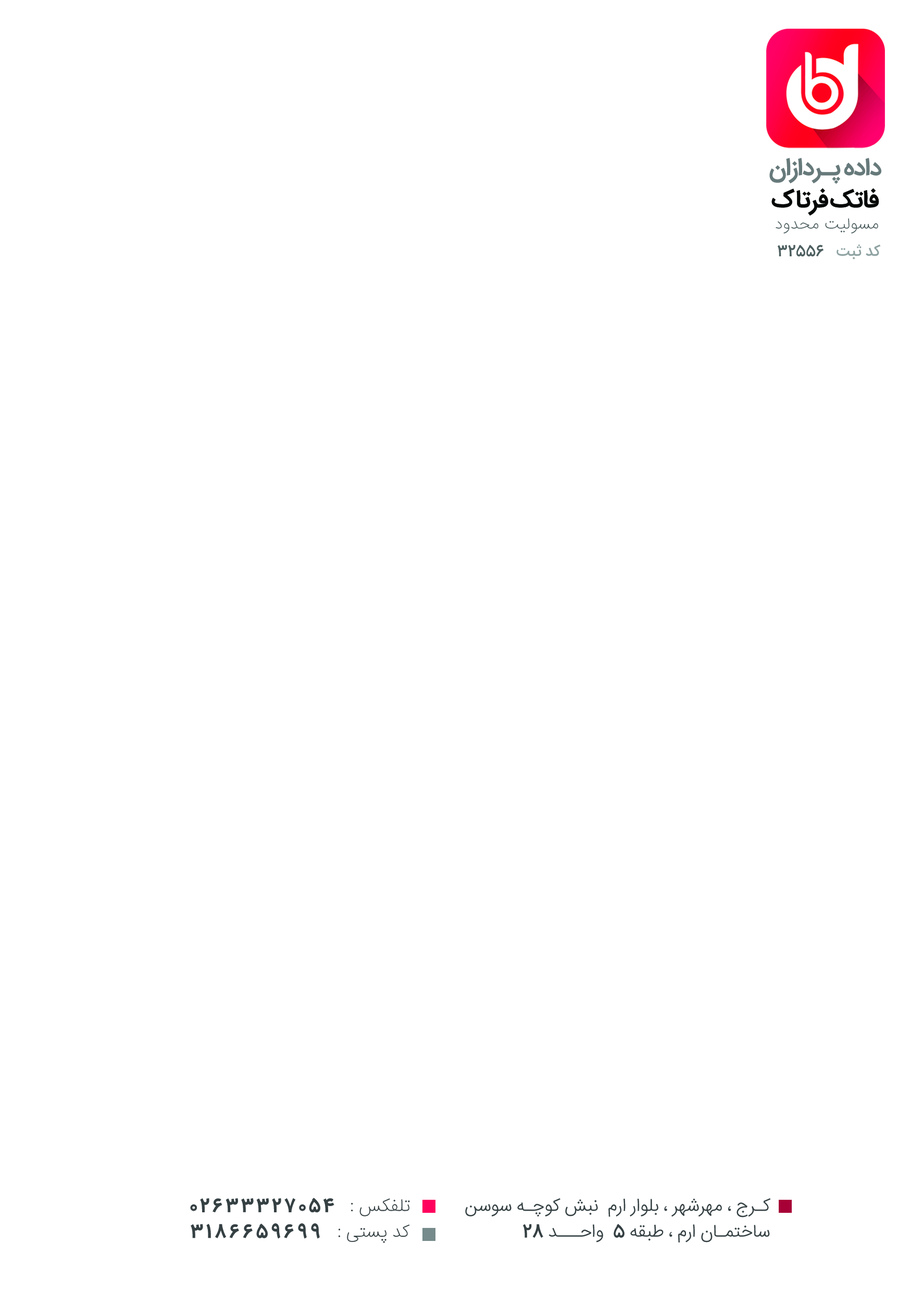
<style>
.page{position:relative;width:923px;height:1292px;background:#ffffff}
.page>*{position:absolute;margin:0}
.t1{font:24.5px/32.2px "IRANSans-Bold";letter-spacing:-0.03em;color:#677a7b}
.t2{font:24.5px/32.2px "IRANSans-Bold";letter-spacing:-0.03em;color:#060808}
.t3{font:16.2px "IRANSans-UltraLight";letter-spacing:0.01em;color:#4a5a5c}
.t4{font:15.5px "IRANSansFaNum-Medium";letter-spacing:-0.01em;color:#90a4a2}
.t5{font:15.5px "IRANSansFaNum-Medium";letter-spacing:-0.01em;color:#4f5f60}
.t6{font:18.2px/25.8px "IRANSansFaNum-Bold";letter-spacing:0.13em;color:#354042}
.t7{font:18.2px/25.8px "IRANSans-UltraLight";letter-spacing:-0.01em;color:#354042}
.t8{font:18.2px/25.8px "IRANSans-Light";letter-spacing:-0.01em;color:#354042}
.t9{font:18.2px/25.8px "IRANSansFaNum-Medium";letter-spacing:-0.01em;color:#354042}
</style>
<div class="page">
<p class="t1" style="left:769px;top:158px;width:112px;height:58px;text-align:center">داده پـردازان<br><span class="t2">فاتک فرتاک</span></p>
<p class="t3" style="left:776px;top:218px;width:102px;height:16px">مسولیت محدود</p>
<p class="t4" style="left:778px;top:244px;width:103px;height:15px">کد ثبت<span class="t5">   32556</span></p>
<p class="t6" style="left:190px;top:1198px;width:220px;height:45px;text-align:center"><span class="t7">تلفکس : </span>  02633327054  <br><span class="t7">کد پستی :   </span>3186659699</p>
<p class="t8" style="left:465px;top:1198px;width:305px;height:44px">کـرج ، مهرشهر ، بلوار ارم  نبش کوچـه سوسن  ساختمـان ارم ، طبقه <span class="t9">5</span>  واحـــد <span class="t9">28</span></p>
</div>
